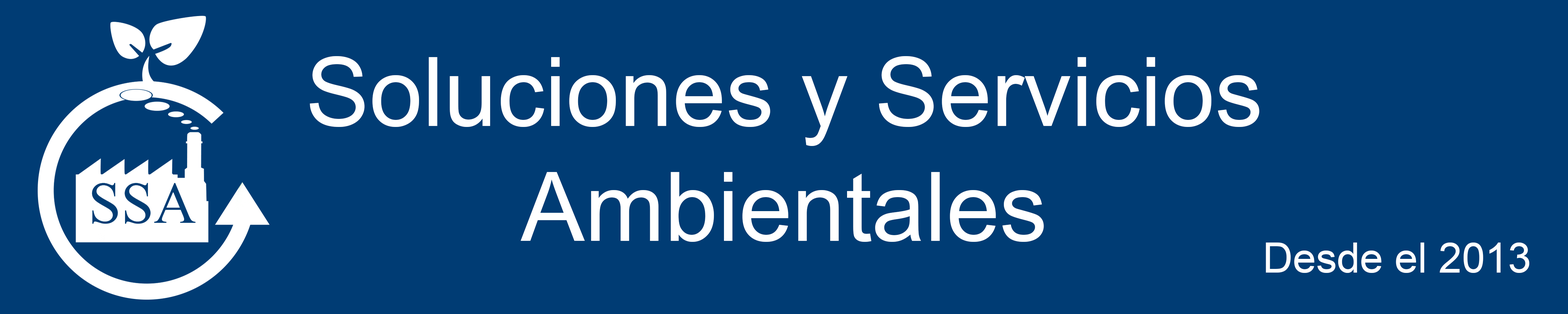
<style>
.page{position:relative;width:1568px;height:314px;background:#003c74}
.page>*{position:absolute;margin:0}
.t1{font:95.6px "ArialMT";color:#ffffff}
.t2{font:41.6px "ArialMT";color:#ffffff}
</style>
<div class="page">
<p class="t1" style="left:310px;top:56px;width:949px;height:186px;text-align:center">Soluciones y Servicios<br>Ambientales</p>
<p class="t2" style="left:1266px;top:242px;width:263px;height:31px">Desde el 2013</p>
</div>
